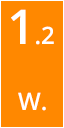
<style>
.page{position:relative;width:64px;height:128px;background:#ff8800}
.page>*{position:absolute;margin:0}
.t1{font:24px "OpenSans-Semibold";color:#ffffff}
.t2{font:48px "OpenSans-Semibold";color:#ffffff}
</style>
<div class="page">
<p class="t1" style="left:11px;top:9px;width:43px;height:36px"><span class="t2">1</span>.2</p>
<p class="t1" style="left:18px;top:92px;width:28px;height:19px">W.</p>
</div>
